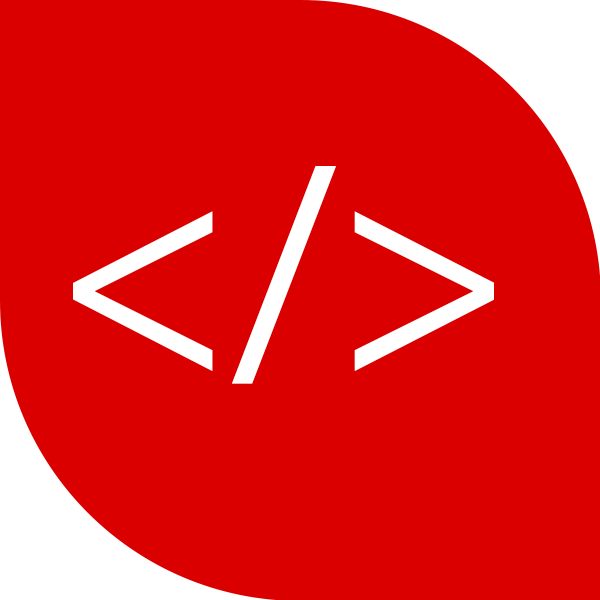
<style>
.page{position:relative;width:600px;height:600px;background:#db0000}
.page>*{position:absolute;margin:0}
.t1{font:300px "MyriadPro-Regular";color:#ffffff}
</style>
<div class="page">
<p class="t1" style="left:73px;top:166px;width:421px;height:218px">&lt;/&gt;</p>
</div>
